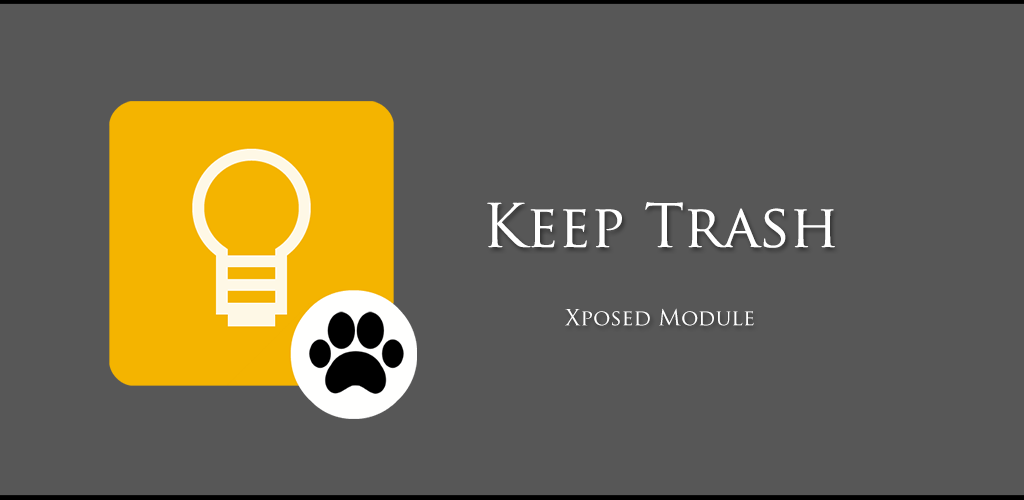
<style>
.page{position:relative;width:1024px;height:500px;background:#575757}
.page>*{position:absolute;margin:0}
.t1{font:58.5px "TrajanPro-Regular";color:#ffffff}
.t2{font:21.7px "TrajanPro-Regular";color:#ffffff}
</style>
<div class="page">
<p class="t1" style="left:487px;top:202px;width:348px;height:46px">Keep Trash</p>
<p class="t2" style="left:565px;top:308px;width:189px;height:18px">Xposed Module</p>
</div>
